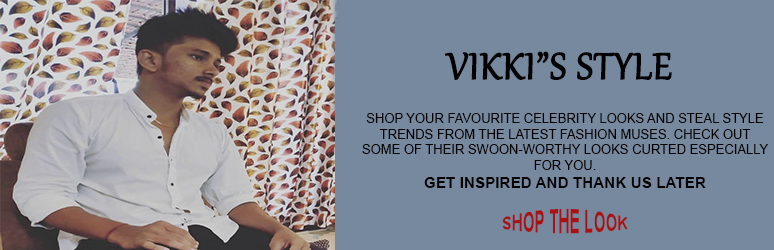
<style>
.page{position:relative;width:774px;height:250px;background:#77899f}
.page>*{position:absolute;margin:0}
.t1{font:45.1px "Gabriola";color:#000000;font-weight:bold}
.t2{font:13px "ArialMT";color:#000000}
.t3{font:15.3px "Arial-BoldMT";color:#000000}
.t4{font:15.3px "Arial-BoldMT";color:#a81212}
</style>
<div class="page">
<p class="t1" style="left:444px;top:51px;width:228px;height:29px">VIKKI”S STYLE</p>
<p class="t2" style="left:362px;top:113px;width:406px;height:75px;text-align:center">SHOP YOUR FAVOURITE CELEBRITY LOOKS AND STEAL STYLE TRENDS FROM THE LATEST FASHION MUSES. CHECK OUT SOME OF THEIR SWOON-WORTHY LOOKS CURTED ESPECIALLY FOR YOU.<br><span class="t3">GET INSPIRED AND THANK US LATER</span></p>
<p class="t4" style="left:502px;top:208px;width:126px;height:26px;text-align:center">SHOP THE LOOK</p>
</div>
